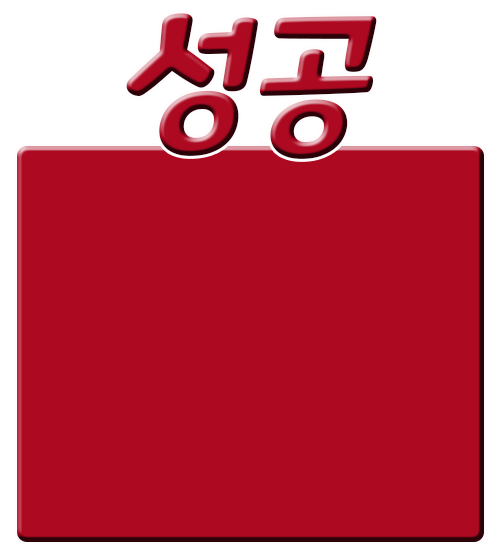
<style>
.page{position:relative;width:502px;height:556px;background:#ad0921}
.page>*{position:absolute;margin:0}
.t1{font:150px "MaplestoryBold";font-style:italic}
</style>
<div class="page">
<p class="t1" style="left:126px;top:13px;width:251px;height:146px">성공</p>
</div>
